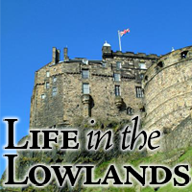
<style>
.page{position:relative;width:192px;height:192px}
.page>*{position:absolute;margin:0}
.t1{font:45.3px/35px "AJensonPro-Semibold";letter-spacing:-0.06em;color:#000000;font-variant:small-caps}
.t2{font:45.3px/35px "AJensonPro-LtIt";letter-spacing:-0.06em;color:#000000}
</style>
<div class="page">
<p class="t1" style="left:3px;top:116px;width:188px;height:70px">Life <span class="t2">in the<br></span>Lowlands</p>
</div>
